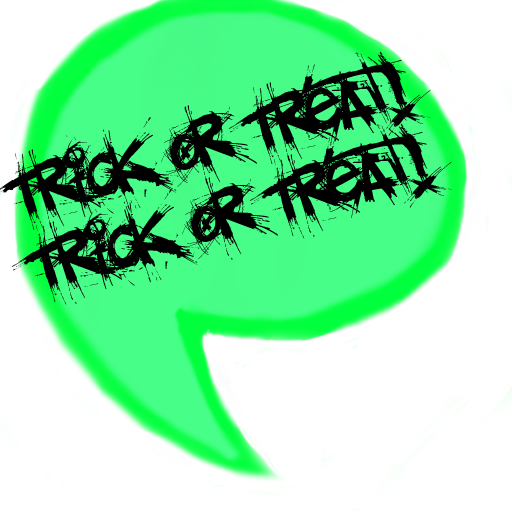
<style>
.page{position:relative;width:512px;height:512px;background:#ffffff}
.page>*{position:absolute;margin:0}
.t1{font:75px "el&fontgohtic!";color:#000000}
</style>
<div class="page">
<p class="t1" style="left:11px;top:123px;width:441px;height:182px;rotate:-16deg">Trick or Treat!</p>
</div>
